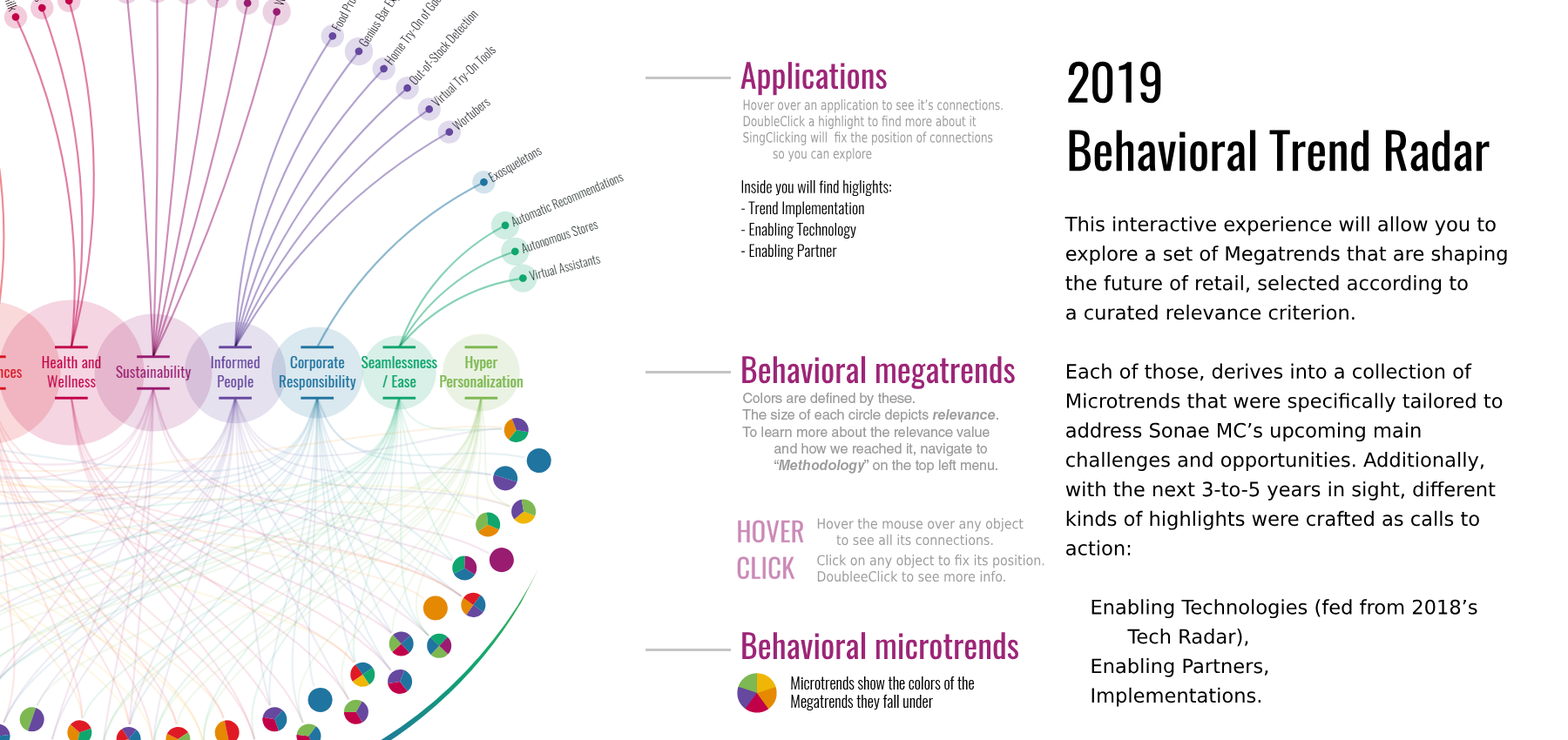
<style>
.page{position:relative;width:1568px;height:740px;background:#ffffff}
.page>*{position:absolute;margin:0}
.t1{font:33.1px "Oswald-Regular";color:#9d2577}
.t2{font:50.2px "Oswald-Regular";color:#000000}
.t3{font:13.9px "HelveticaLTStd-Roman";color:#9d9d9d;scale:0.75 1}
.t4{font:15.7px "Oswald-Light";color:#000000}
.t5{font:19.6px/29.5px "HelveticaLTStd-Roman";color:#000000}
.t6{font:13.9px "HelveticaLTStd-Roman";color:#9d9d9d}
.t7{font:13.9px "HelveticaLTStd-BoldObl";color:#9d9d9d}
.t8{font:13.9px "HelveticaLTStd-Roman";color:#9d9d9d;scale:0.89 1}
</style>
<div class="page">
<p class="t1" style="left:740px;top:62px;width:147px;height:34px">Applications</p>
<p class="t2" style="left:1068px;top:61px;width:422px;height:111px">2019<br>Behavioral Trend Radar</p>
<p class="t3" style="left:743px;top:99px;width:260px;height:63px">Hover over an application to see it’s connections.<br>DoubleClick a highlight to find more about it<br>SingClicking will  fix the position of connections<br>         so you can explore</p>
<p class="t4" style="left:741px;top:180px;width:150px;height:80px">Inside you will find higlights:<br>- Trend Implementation<br>- Enabling Technology<br>- Enabling Partner</p>
<p class="t5" style="left:1064px;top:216px;width:443px;height:491px">This interactive experience will allow you to<br>explore a set of Megatrends that are shaping<br>the future of retail, selected according to<br>a curated relevance criterion.<br><br>Each of those, derives into a collection of<br>Microtrends that were specifically tailored to<br>address Sonae MC’s upcoming main<br>challenges and opportunities. Additionally,<br>with the next 3-to-5 years in sight, different<br>kinds of highlights were crafted as calls to<br>action:<br><br>    Enabling Technologies (fed from 2018’s<br>          Tech Radar),<br>    Enabling Partners,<br>    Implementations.</p>
<p class="t1" style="left:742px;top:356px;width:273px;height:33px">Behavioral megatrends</p>
<p class="t6" style="left:742px;top:393px;width:256px;height:81px">Colors are defined by these.<br>The size of each circle depicts <span class="t7">relevance</span>.<br>To learn more about the relevance value<br> and how we reached it, navigate to<br> “<span class="t7">Methodology</span>” on the top left menu.</p>
<p class="t8" style="left:817px;top:518px;width:207px;height:27px">Hover the mouse over any object<br>     to see all its connections.</p>
<p class="t8" style="left:817px;top:555px;width:227px;height:27px">Click on any object to fix its position.<br>DoubleeClick to see more info.</p>
<p class="t1" style="left:742px;top:632px;width:276px;height:28px">Behavioral microtrends</p>
<p class="t4" style="left:791px;top:677px;width:183px;height:34px">Microtrends show the colors of the<br>Megatrends they fall under</p>
</div>
